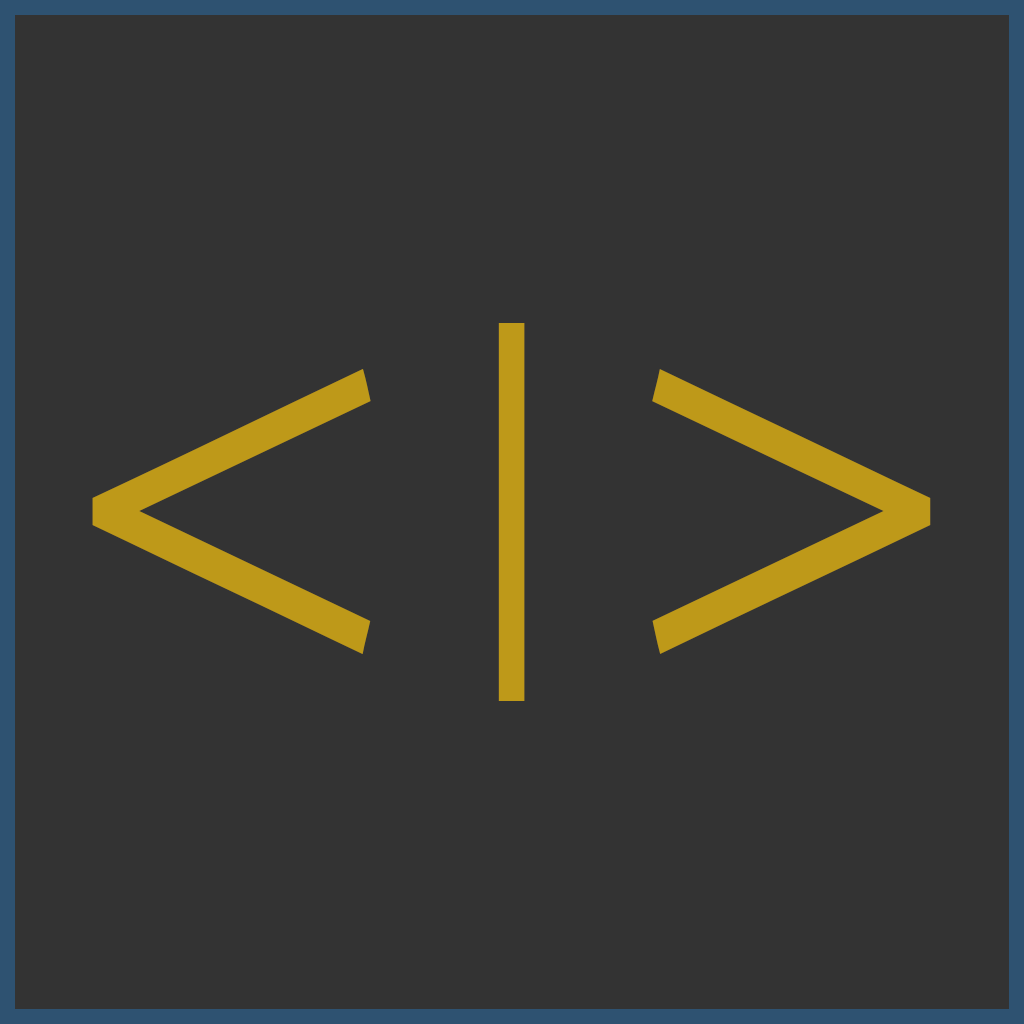
<style>
.page{position:relative;width:1024px;height:1024px;background:#333333}
.page>*{position:absolute;margin:0}
.t1{font:675px "Microsoft-Yi-Baiti";color:#be9919}
</style>
<div class="page">
<p class="t1" style="left:92px;top:323px;width:839px;height:378px">&lt;|&gt;</p>
</div>
